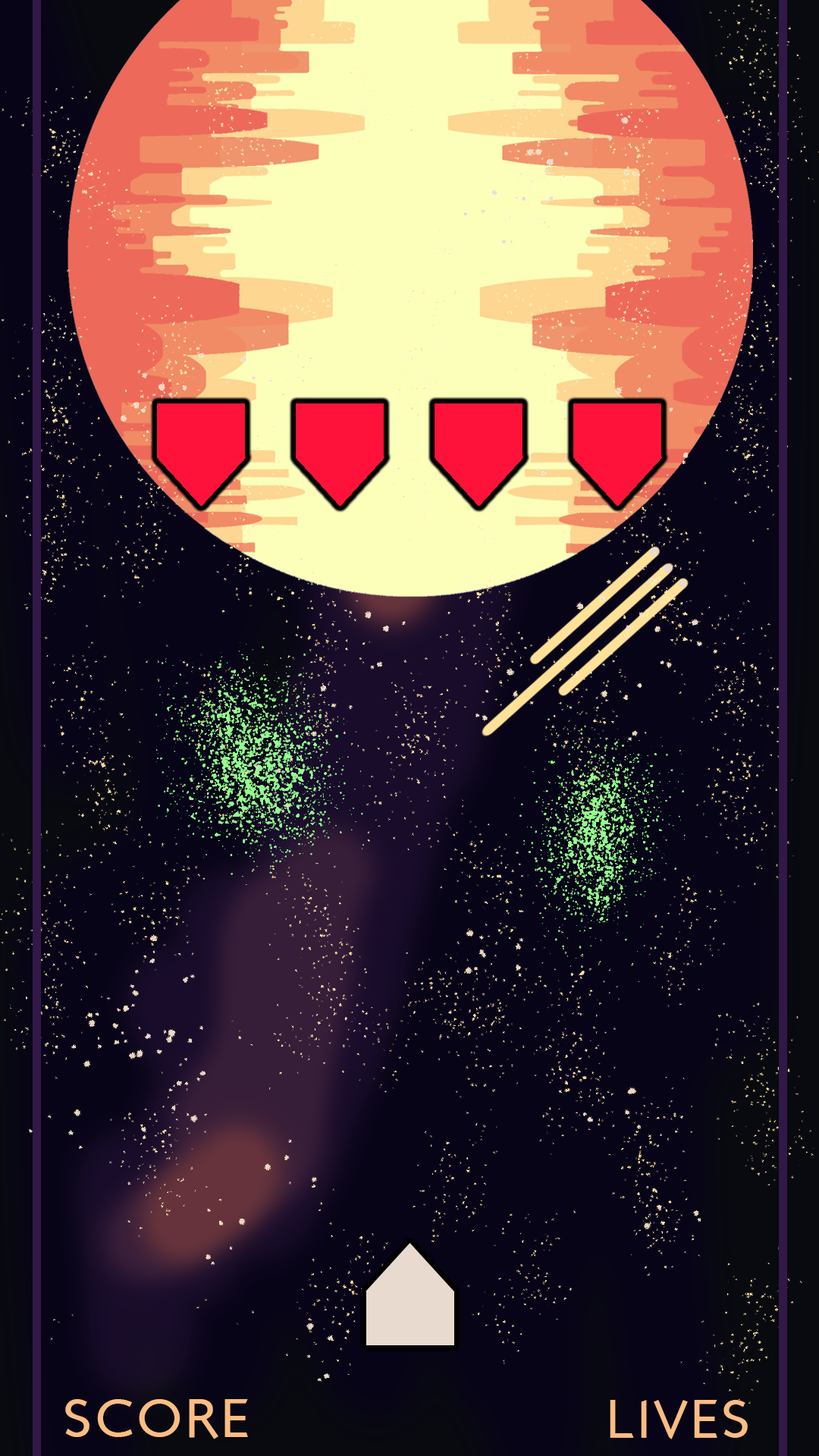
<style>
.page{position:relative;width:819px;height:1456px;background:#080418}
.page>*{position:absolute;margin:0}
.t1{font:54.6px "LondonBetween";letter-spacing:0.05em;color:#fcbd83}
</style>
<div class="page">
<p class="t1" style="left:65px;top:1399px;width:183px;height:40px">SCORE</p>
<p class="t1" style="left:610px;top:1400px;width:138px;height:39px">LIVES</p>
</div>
